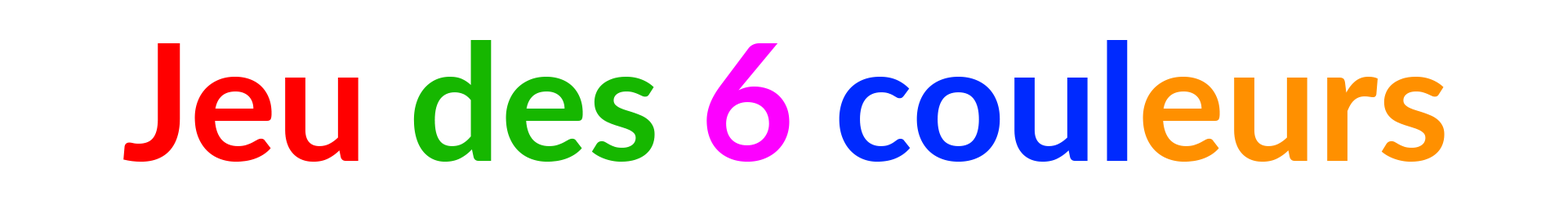
<style>
.page{position:relative;width:1568px;height:218px;background:#ffffff}
.page>*{position:absolute;margin:0}
.t1{font:163.3px "Lato-Bold";color:#002afe}
.t2{font:163.3px "Lato-Bold";color:#ff0000}
.t3{font:163.3px "Lato-Bold";color:#16b700}
.t4{font:163.3px "Lato-Bold";color:#fc01ff}
.t5{font:163.3px "Lato-Bold";color:#ff9000}
</style>
<div class="page">
<p class="t1" style="left:123px;top:40px;width:1322px;height:122px"><span class="t2">Jeu </span><span class="t3">des </span><span class="t4">6 </span>coul<span class="t5">eurs</span></p>
</div>
